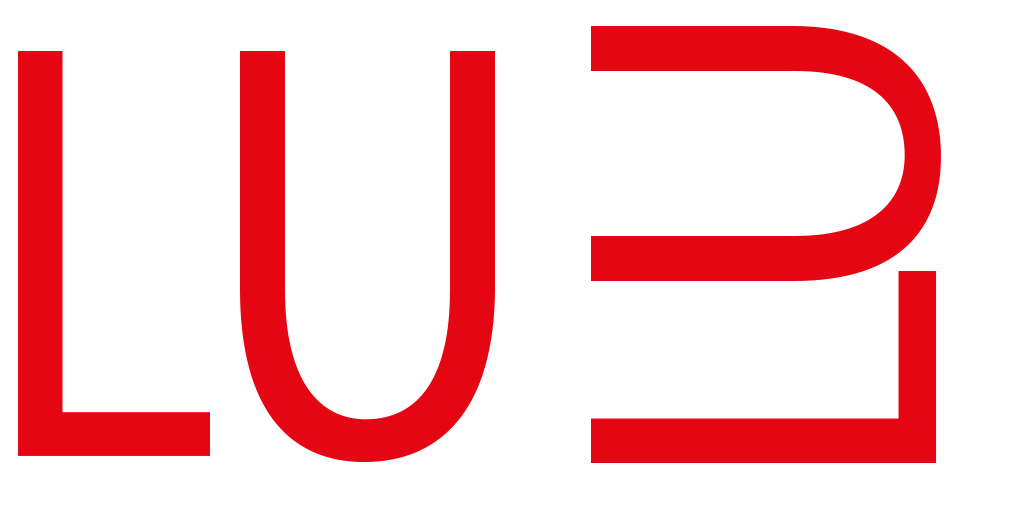
<style>
.page{position:relative;width:1024px;height:512px;background:#ffffff}
.page>*{position:absolute;margin:0}
.t1{font:512px "MyriadPro-Regular";letter-spacing:-0.08em;color:#e40613}
.t2{font:600.7px "MyriadPro-Regular";color:#e40613;scale:0.85 1}
</style>
<div class="page">
<p class="t1" style="left:591px;top:26px;width:350px;height:437px;rotate:-90deg">LU</p>
<p class="t2" style="left:18px;top:51px;width:477px;height:412px">LU</p>
</div>
